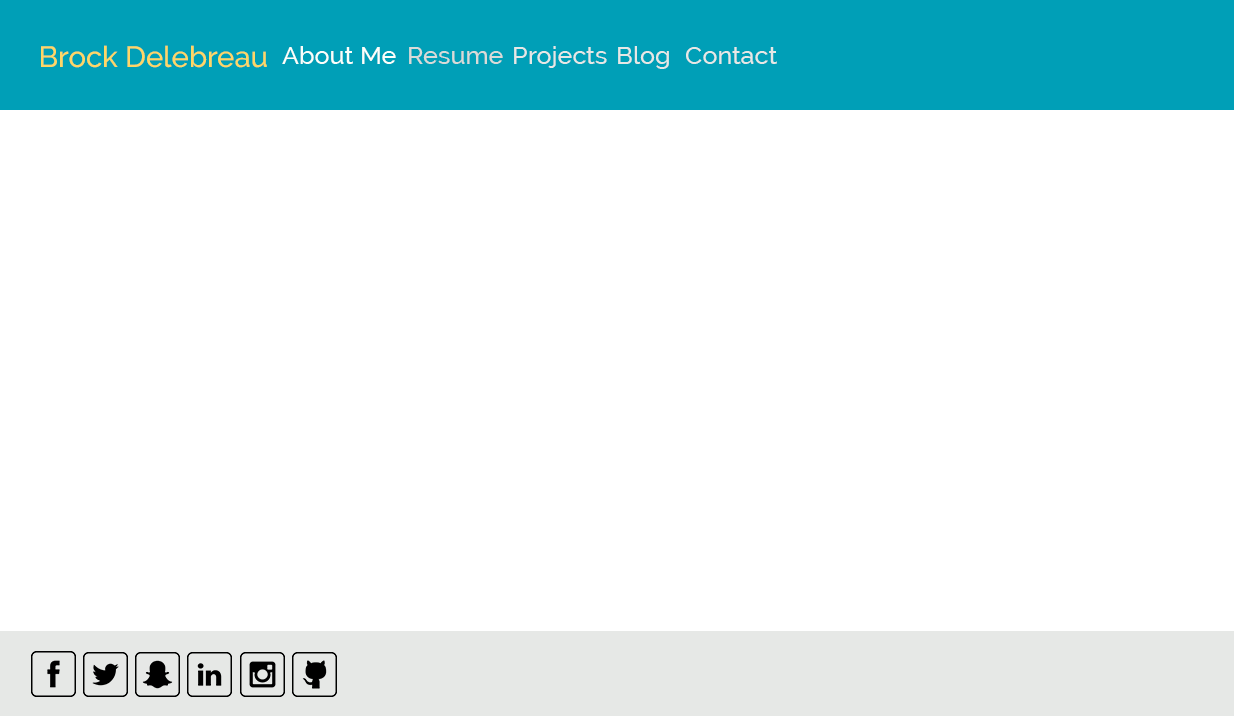
<style>
.page{position:relative;width:1234px;height:717px;background:#ffffff}
.page>*{position:absolute;margin:0}
.t1{font:29.2px "Raleway-Medium";color:#fed766}
.t2{font:25px "Raleway-Medium";color:#fbfffb}
.t3{font:25px "Raleway-Medium";color:#d8dbd8}
.t4{font:25px "Raleway-Medium";color:#e6e8e6}
</style>
<div class="page">
<p class="t1" style="left:41px;top:45px;width:226px;height:23px">Brock Delebreau</p>
<p class="t2" style="left:282px;top:46px;width:114px;height:18px">About Me</p>
<p class="t3" style="left:409px;top:47px;width:94px;height:17px">Resume</p>
<p class="t4" style="left:514px;top:46px;width:93px;height:22px">Projects</p>
<p class="t4" style="left:618px;top:46px;width:51px;height:23px">Blog</p>
<p class="t4" style="left:686px;top:47px;width:91px;height:17px">Contact</p>
</div>
